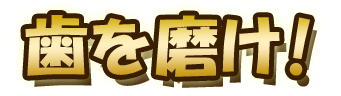
<style>
.page{position:relative;width:341px;height:96px}
.page>*{position:absolute;margin:0}
.t1{font:64.8px "HGSoeiKakupoptai"}
</style>
<div class="page">
<p class="t1" style="left:25px;top:14px;width:285px;height:63px">歯を磨け!</p>
</div>
